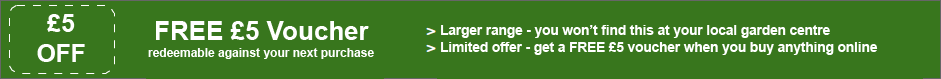
<style>
.page{position:relative;width:941px;height:79px;background:#38761d}
.page>*{position:absolute;margin:0}
.t1{font:24.7px "Arial-BoldMT";color:#ffffff}
.t2{font:26px "Arial-BoldMT";color:#ffffff}
.t3{font:13.5px "Arial-BoldMT";color:#ffffff}
.t4{font:12px "Arial-BoldMT";color:#ffffff}
</style>
<div class="page">
<p class="t1" style="left:37px;top:14px;width:48px;height:48px;text-align:center">£5<br>OFF</p>
<p class="t2" style="left:156px;top:21px;width:213px;height:19px">FREE £5 Voucher</p>
<p class="t3" style="left:441px;top:25px;width:389px;height:13px">Larger range - you won’t find this at your local garden centre</p>
<p class="t4" style="left:148px;top:48px;width:226px;height:11px">redeemable against your next purchase</p>
<p class="t3" style="left:441px;top:42px;width:437px;height:13px">Limited offer - get a FREE £5 voucher when you buy anything online</p>
</div>
